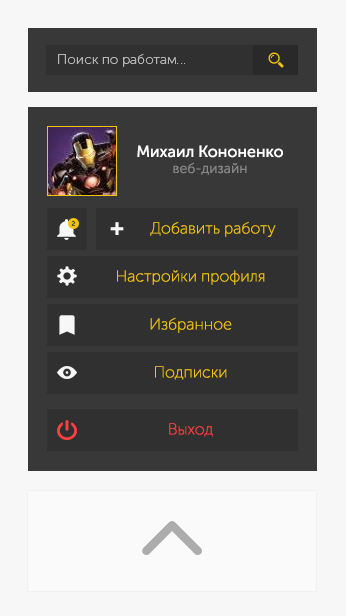
<style>
.page{position:relative;width:346px;height:616px;background:#383838}
.page>*{position:absolute;margin:0}
.t1{font:14px "MuseoSansCyrl-100";color:#b7b7b7}
.t2{font:16px "MuseoSansCyrl-500";color:#ffffff}
.t3{font:14px "MuseoSansCyrl-300";color:#878787}
.t4{font:7px "MuseoSansCyrl-500";color:#383838}
.t5{font:22px "MuseoSansCyrl-900";color:#f7f7f7}
.t6{font:16px "MuseoSansCyrl-100";color:#f1c40f}
.t7{font:16px "MuseoSansCyrl-100";color:#ff4040}
</style>
<div class="page">
<p class="t1" style="left:58px;top:54px;width:128px;height:13px">Поиск по работам...</p>
<p class="t2" style="left:137px;top:145px;width:146px;height:13px">Михаил Кононенко</p>
<p class="t3" style="left:173px;top:162px;width:74px;height:13px">веб-дизайн</p>
<p class="t4" style="left:71px;top:220px;width:5px;height:6px">2</p>
<p class="t5" style="left:110px;top:222px;width:14px;height:13px">+</p>
<p class="t6" style="left:150px;top:221px;width:126px;height:16px">Добавить работу</p>
<p class="t6" style="left:117px;top:270px;width:148px;height:15px">Настройки профиля</p>
<p class="t6" style="left:150px;top:317px;width:82px;height:16px">Избранное</p>
<p class="t6" style="left:155px;top:366px;width:72px;height:14px">Подписки</p>
<p class="t7" style="left:169px;top:423px;width:44px;height:14px">Выход</p>
</div>
